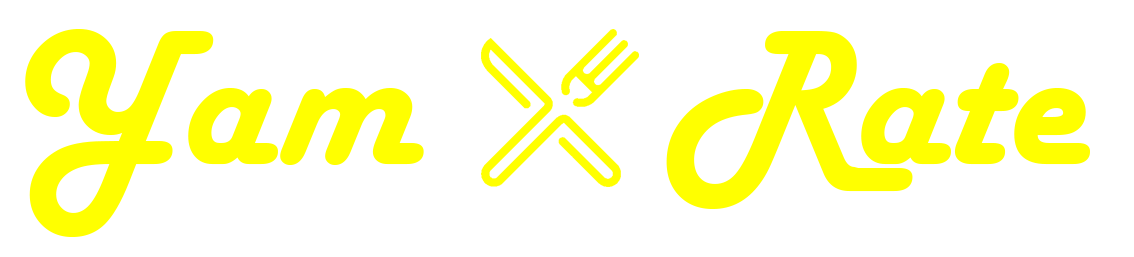
<style>
.page{position:relative;width:1134px;height:257px;background:#ffffff}
.page>*{position:absolute;margin:0}
.t1{font:200px "HarlowSolid";color:#ffff00}
</style>
<div class="page">
<p class="t1" style="left:25px;top:29px;width:1065px;height:208px">Yam     Rate</p>
</div>
